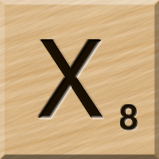
<style>
.page{position:relative;width:159px;height:159px}
.page>*{position:absolute;margin:0}
.t1{font:116px "MS-UIGothic";color:#180e01}
.t2{font:36px "MS-UIGothic";color:#1c1101;font-weight:bold;scale:1.1 1}
</style>
<div class="page">
<p class="t1" style="left:38px;top:40px;width:66px;height:78px">X</p>
<p class="t2" style="left:120px;top:104px;width:18px;height:27px">8</p>
</div>
